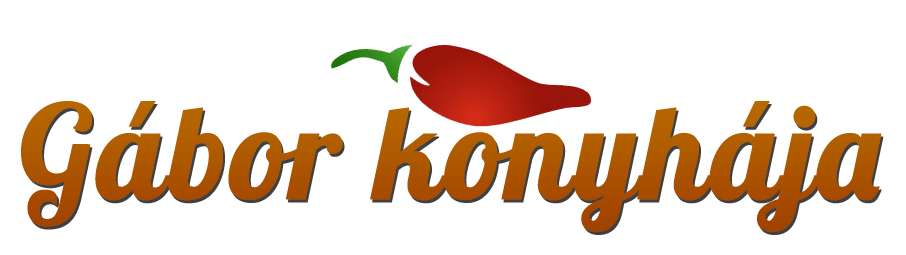
<style>
.page{position:relative;width:906px;height:255px;background:#ffffff}
.page>*{position:absolute;margin:0}
.t1{font:130px "Lobster1.4";color:#ac5500;font-weight:bold}
</style>
<div class="page">
<p class="t1" style="left:21px;top:101px;width:861px;height:131px">Gábor konyhája</p>
</div>
